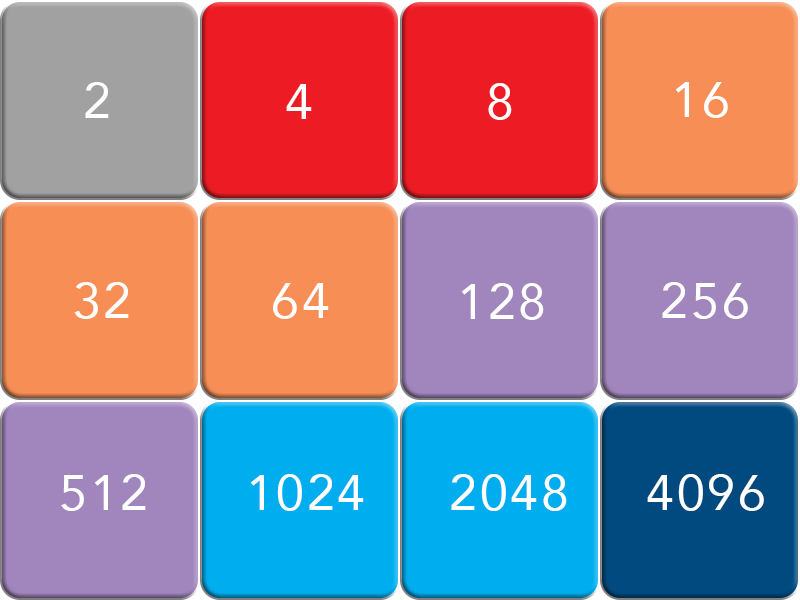
<style>
.page{position:relative;width:800px;height:600px}
.page>*{position:absolute;margin:0}
.t1{font:50px "Avenir-Roman";letter-spacing:0.055em;color:#ffffff}
</style>
<div class="page">
<p class="t1" style="left:85px;top:82px;width:24px;height:36px">2</p>
<p class="t1" style="left:286px;top:84px;width:26px;height:35px">4</p>
<p class="t1" style="left:488px;top:83px;width:24px;height:37px">8</p>
<p class="t1" style="left:675px;top:82px;width:53px;height:36px">16</p>
<p class="t1" style="left:74px;top:282px;width:55px;height:37px">32</p>
<p class="t1" style="left:273px;top:283px;width:56px;height:36px">64</p>
<p class="t1" style="left:461px;top:283px;width:83px;height:37px">128</p>
<p class="t1" style="left:662px;top:282px;width:86px;height:37px">256</p>
<p class="t1" style="left:61px;top:474px;width:85px;height:37px">512</p>
<p class="t1" style="left:250px;top:474px;width:114px;height:37px">1024</p>
<p class="t1" style="left:451px;top:474px;width:116px;height:37px">2048</p>
<p class="t1" style="left:647px;top:474px;width:117px;height:37px">4096</p>
</div>
